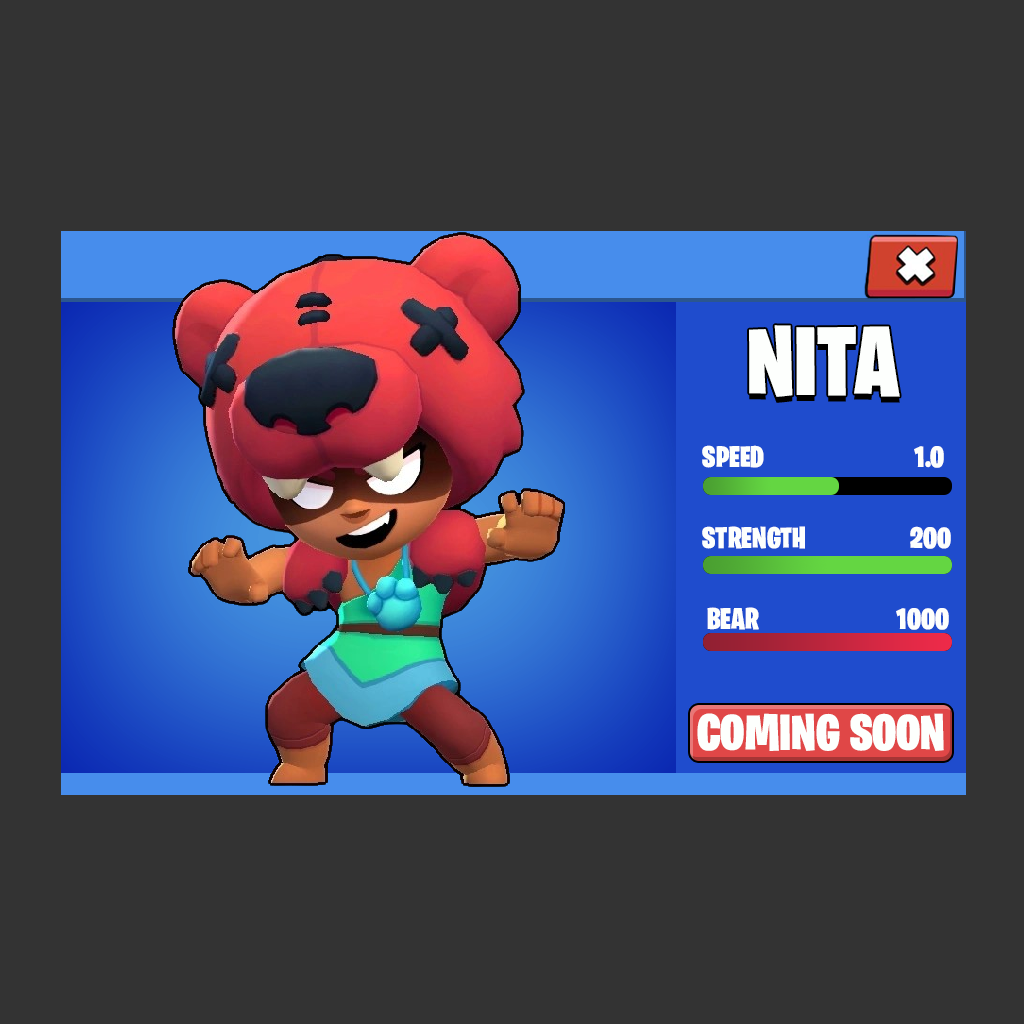
<style>
.page{position:relative;width:1024px;height:1024px;background:#333333}
.page>*{position:absolute;margin:0}
.t1{font:97.7px "BurbankBigCondensed-Black";color:#fdfffd}
.t2{font:30px "BurbankBigCondensed-Black";color:#fdfffd}
.t3{font:51px "BurbankBigCondensed-Black";color:#fdfffd}
</style>
<div class="page">
<p class="t1" style="left:749px;top:325px;width:151px;height:72px">NITA</p>
<p class="t2" style="left:702px;top:445px;width:62px;height:23px">SPEED</p>
<p class="t2" style="left:914px;top:446px;width:30px;height:22px">1.0</p>
<p class="t2" style="left:702px;top:526px;width:103px;height:23px">STRENGTH</p>
<p class="t2" style="left:910px;top:526px;width:41px;height:23px">200</p>
<p class="t2" style="left:707px;top:607px;width:52px;height:23px">BEAR</p>
<p class="t2" style="left:896px;top:608px;width:53px;height:22px">1000</p>
<p class="t3" style="left:697px;top:713px;width:247px;height:38px">COMING SOON</p>
</div>
